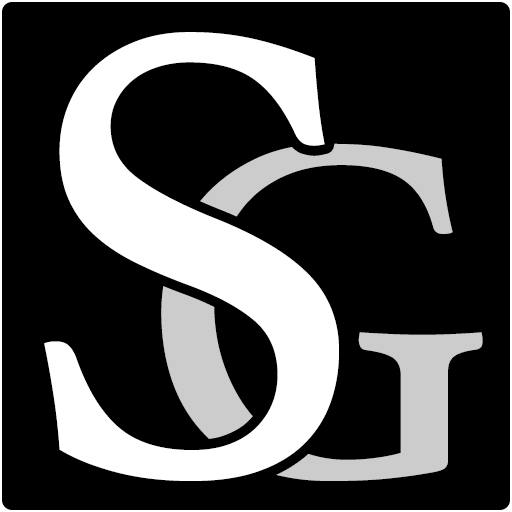
<style>
.page{position:relative;width:512px;height:512px;background:#000000}
.page>*{position:absolute;margin:0}
.t1{font:666.7px "Athelas-Regular";color:#ffffff}
.t2{font:500px "Athelas-Regular";color:#cccccc}
</style>
<div class="page">
<p class="t1" style="left:44px;top:32px;width:295px;height:449px">S</p>
<p class="t2" style="left:161px;top:143px;width:322px;height:338px">G</p>
</div>
